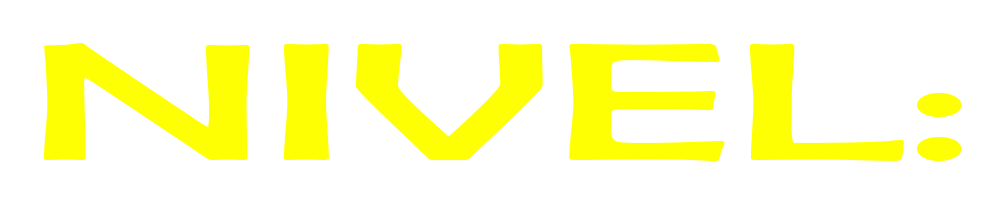
<style>
.page{position:relative;width:1000px;height:200px;background:#ffffff}
.page>*{position:absolute;margin:0}
.t1{font:169.1px "BerlinSansFB-Reg";color:#ffff04;scale:1.98 1}
</style>
<div class="page">
<p class="t1" style="left:43px;top:43px;width:919px;height:119px">NIVEL:</p>
</div>
